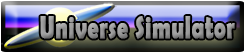
<style>
.page{position:relative;width:245px;height:53px}
.page>*{position:absolute;margin:0}
.t1{font:31.6px "BerlinSansFBDemi-Bold";letter-spacing:0.04em;color:#9a9a9a;font-weight:bold;scale:0.65 1}
</style>
<div class="page">
<p class="t1" style="left:40px;top:16px;width:195px;height:23px">Universe Simulator</p>
</div>
